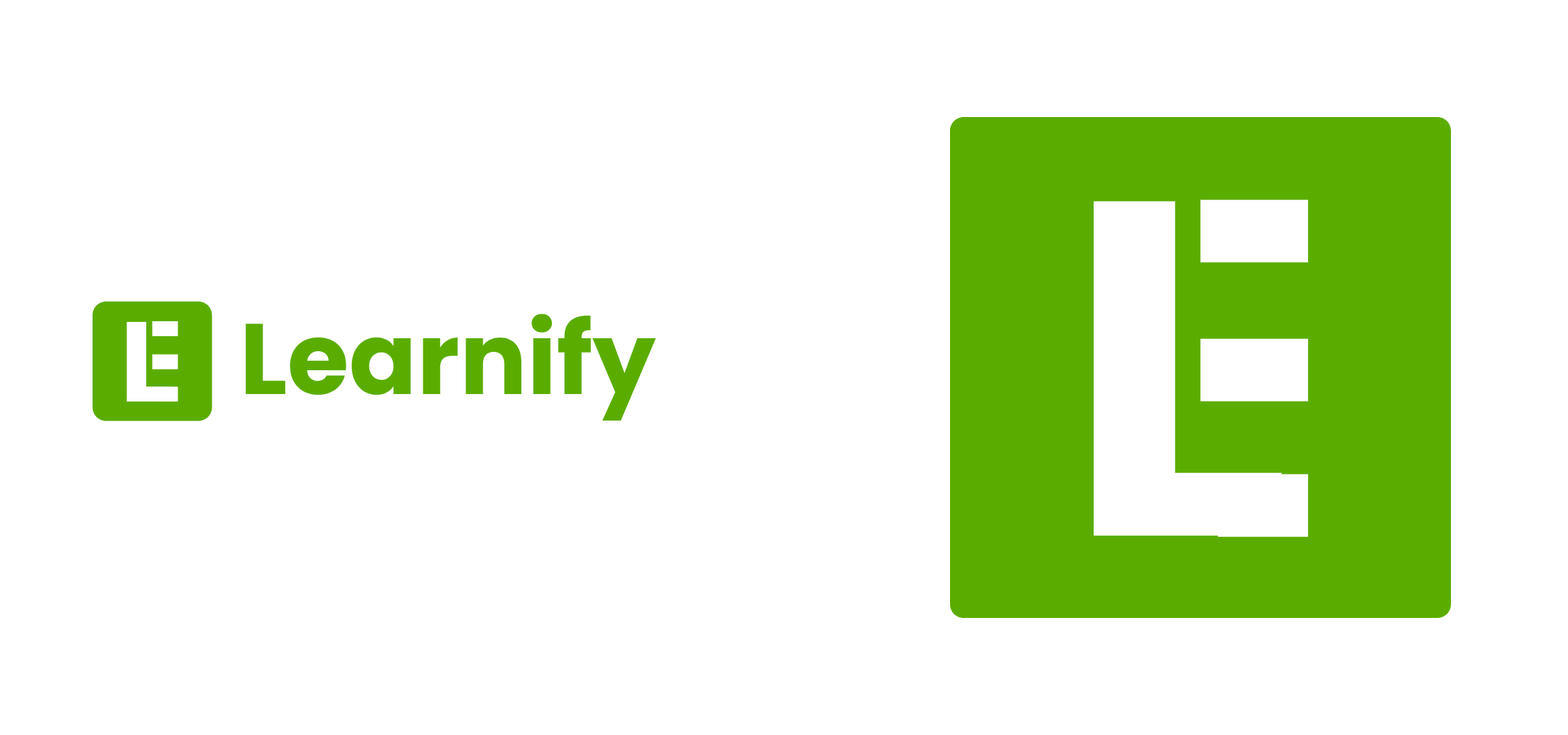
<style>
.page{position:relative;width:1568px;height:735px;background:#ffffff}
.page>*{position:absolute;margin:0}
.t1{font:476.2px "Poppins-Bold";letter-spacing:-0.087em;color:#ffffff}
.t2{font:100px "Poppins-Bold";color:#5aad00}
.t3{font:113.5px "Poppins-Bold";letter-spacing:-0.087em;color:#ffffff}
</style>
<div class="page">
<p class="t1" style="left:1094px;top:201px;width:188px;height:335px">L</p>
<p class="t2" style="left:246px;top:314px;width:410px;height:107px">Learnify</p>
<p class="t3" style="left:127px;top:322px;width:45px;height:80px">L</p>
</div>
